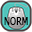
<style>
.page{position:relative;width:32px;height:32px}
.page>*{position:absolute;margin:0}
.t1{font:10px "LucidaSans-Typewriter";color:#000000}
</style>
<div class="page">
<p class="t1" style="left:4px;top:17px;width:24px;height:8px">NORM</p>
</div>
